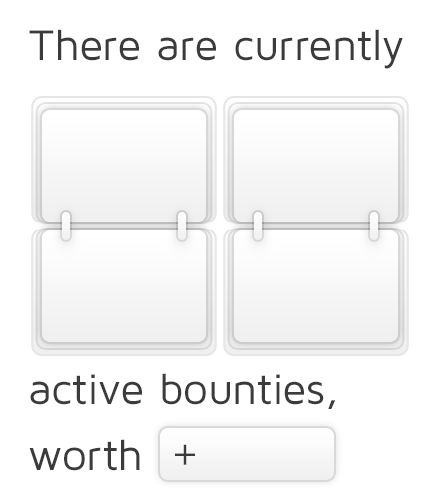
<style>
.page{position:relative;width:440px;height:500px;background:#ffffff}
.page>*{position:absolute;margin:0}
.t1{font:44px "MavenProRegular";color:#3b3b3b}
.t2{font:44px/66px "MavenProRegular";color:#3b3b3b}
.t3{font:44px "AnonymousPro";color:#3b3b3b}
</style>
<div class="page">
<p class="t1" style="left:29px;top:29px;width:374px;height:40px">There are currently</p>
<p class="t2" style="left:29px;top:373px;width:306px;height:98px">active bounties,<br>worth</p>
<p class="t3" style="left:175px;top:444px;width:20px;height:21px">+</p>
</div>
